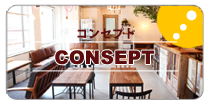
<style>
.page{position:relative;width:210px;height:105px;background:#ffffff}
.page>*{position:absolute;margin:0}
.t1{font:12px "KozGoPr6N-Heavy";letter-spacing:-0.005em;color:#5d0d0d}
.t2{font:18.9px "Arial-Black";letter-spacing:-0.005em;color:#5d0d0d}
</style>
<div class="page">
<p class="t1" style="left:77px;top:27px;width:57px;height:12px">コンセプト</p>
<p class="t2" style="left:55px;top:50px;width:100px;height:15px">CONSEPT</p>
</div>
